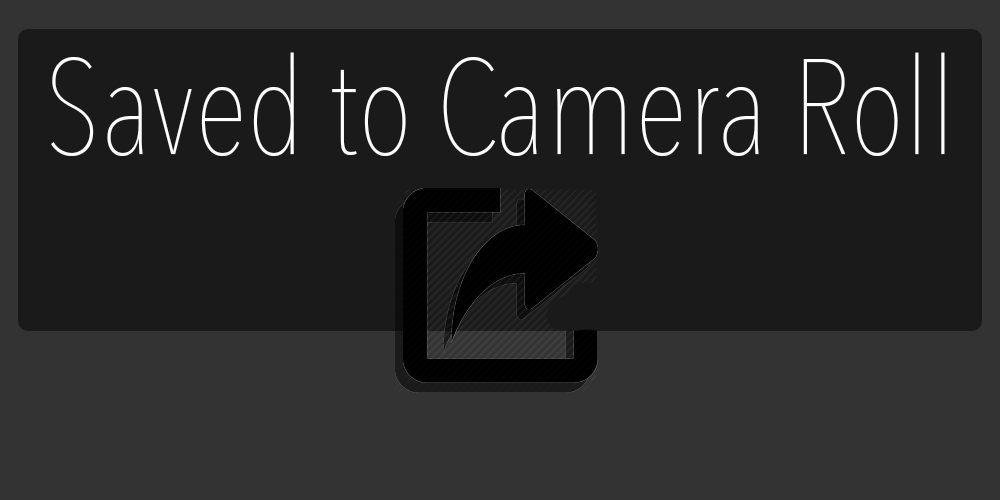
<style>
.page{position:relative;width:1000px;height:500px;background:#1a1a1a}
.page>*{position:absolute;margin:0}
.t1{font:133.7px "AvenirNextCondensed-UltraLight";color:#fffefe}
</style>
<div class="page">
<p class="t1" style="left:51px;top:52px;width:894px;height:104px">Saved to Camera Roll</p>
</div>
